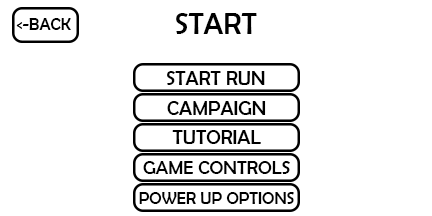
<style>
.page{position:relative;width:432px;height:216px;background:#ffffff}
.page>*{position:absolute;margin:0}
.t1{font:30px "BerlinSansFB-Reg";color:#000000}
.t2{font:17px "BerlinSansFB-Reg";color:#000000}
.t3{font:20px "BerlinSansFB-Reg";color:#000000}
.t4{font:19px "BerlinSansFB-Reg";color:#000000}
</style>
<div class="page">
<p class="t1" style="left:176px;top:13px;width:81px;height:21px">START</p>
<p class="t2" style="left:16px;top:18px;width:55px;height:12px">&lt;-BACK</p>
<p class="t3" style="left:167px;top:71px;width:98px;height:14px">START RUN</p>
<p class="t3" style="left:167px;top:101px;width:99px;height:14px">CAMPAIGN</p>
<p class="t3" style="left:172px;top:130px;width:89px;height:14px">TUTORIAL</p>
<p class="t4" style="left:143px;top:161px;width:147px;height:13px">GAME CONTROLS</p>
<p class="t2" style="left:139px;top:192px;width:155px;height:12px">POWER UP OPTIONS</p>
</div>
